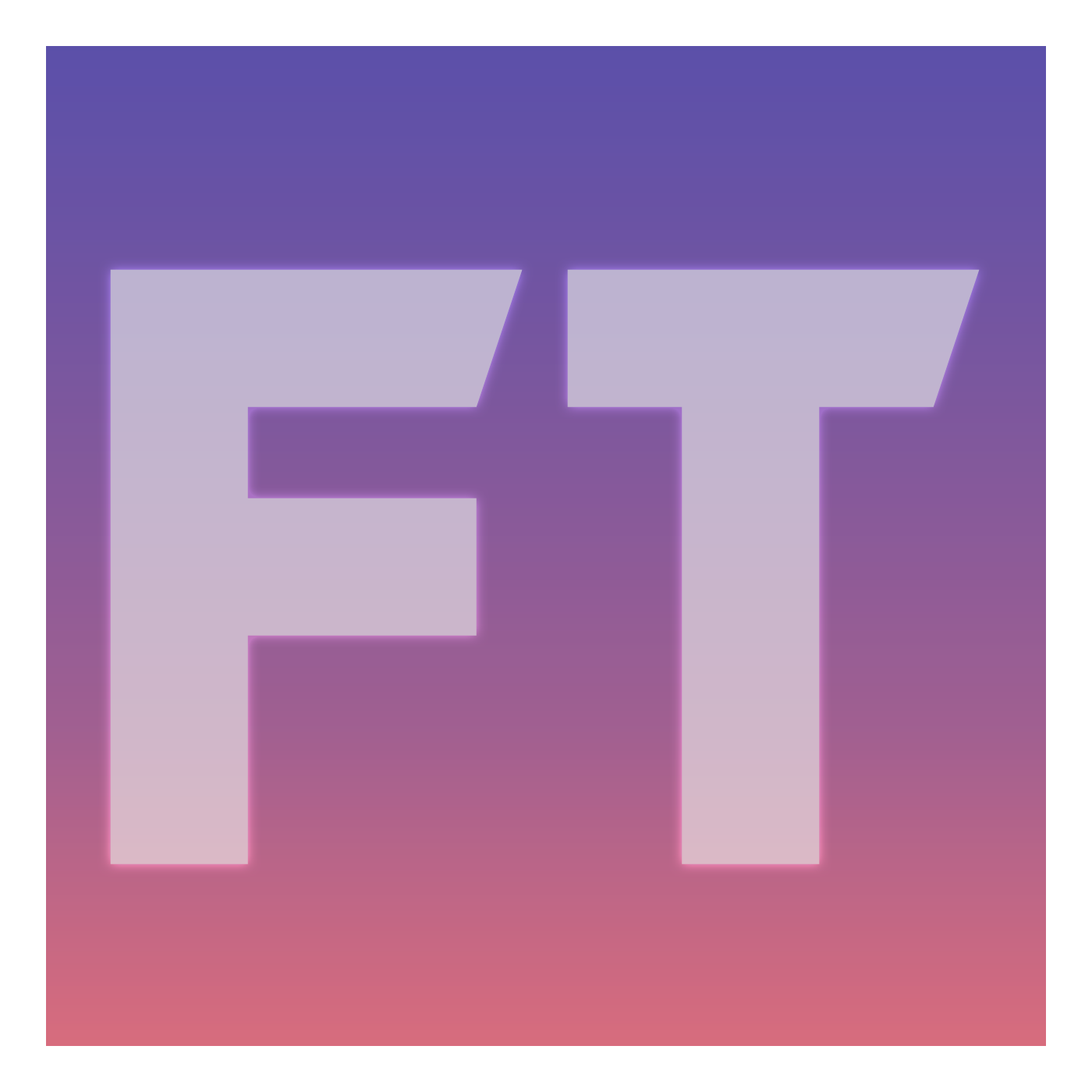
<style>
.page{position:relative;width:1092px;height:1092px}
.page>*{position:absolute;margin:0}
.t1{font:936px "ChasingRabbits";color:#c5b5cd}
</style>
<div class="page">
<p class="t1" style="left:110px;top:269px;width:870px;height:595px">FT</p>
</div>
